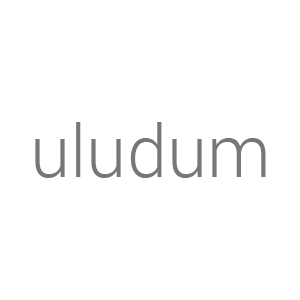
<style>
.page{position:relative;width:300px;height:300px;background:#ffffff}
.page>*{position:absolute;margin:0}
.t1{font:72px "Roboto-Light";color:#777777}
</style>
<div class="page">
<p class="t1" style="left:35px;top:122px;width:231px;height:56px">uludum</p>
</div>
